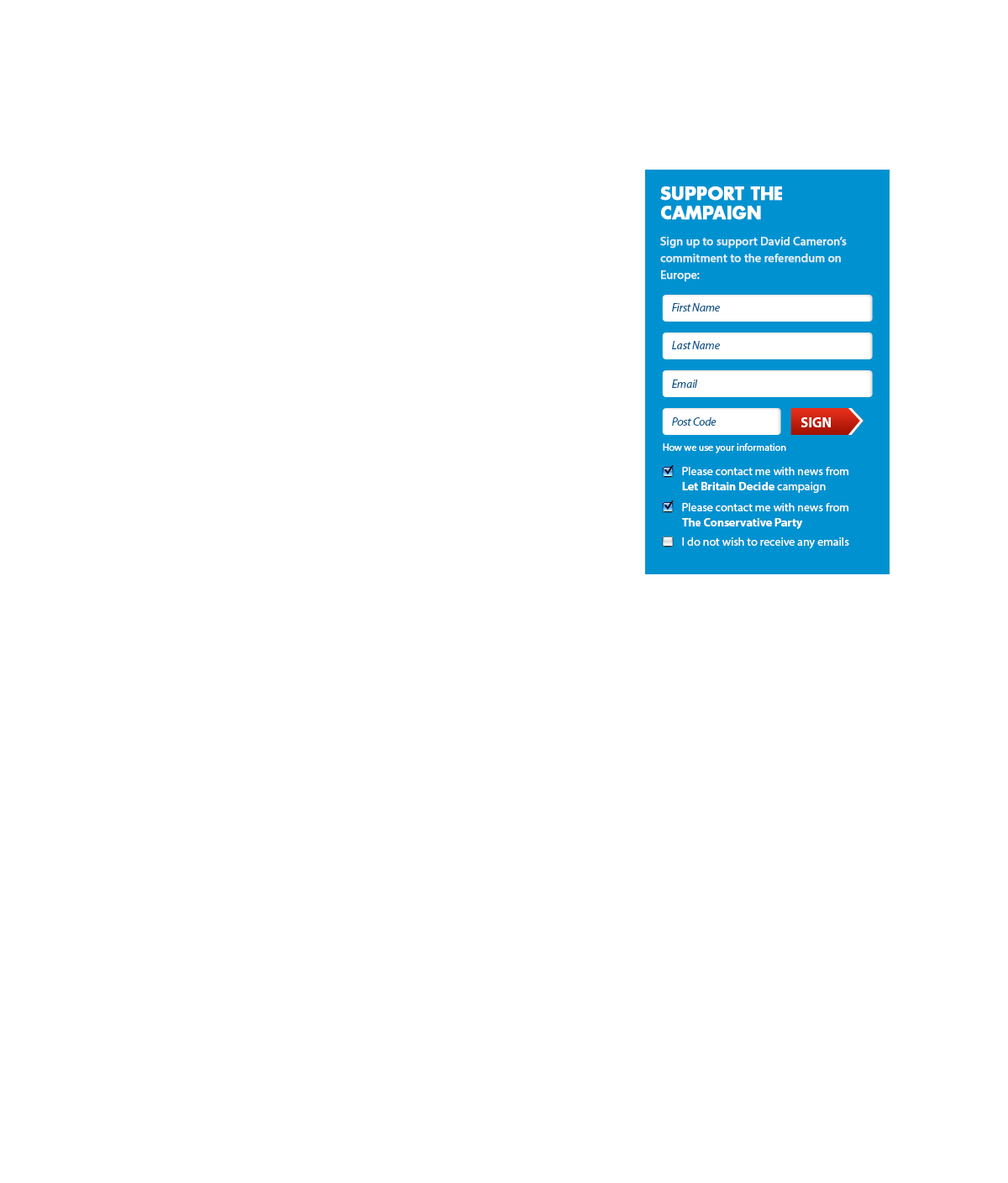
<style>
.page{position:relative;width:1008px;height:1183px;background:#ffffff}
.page>*{position:absolute;margin:0}
.t1{font:16.8px/19.3px "Futura-Bold";color:#ffffff;text-transform:uppercase;font-weight:bold}
.t2{font:11.8px/16.8px "MyriadPro-Regular";color:#dfeff9;font-weight:bold}
.t3{font:11.8px "MyriadPro-It";letter-spacing:-0.02em;color:#05558b}
.t4{font:14.3px "MyriadPro-Bold";color:#ffffff;text-transform:uppercase}
.t5{font:10.1px "MyriadPro-Regular";color:#ffffff}
.t6{font:11.8px/15.1px "MyriadPro-Regular";color:#ffffff}
.t7{font:11.8px/15.1px "MyriadPro-Bold";color:#ffffff}
.t8{font:11.8px "MyriadPro-Regular";color:#ffffff}
</style>
<div class="page">
<p class="t1" style="left:660px;top:186px;width:122px;height:34px">SUpport the campaign</p>
<p class="t2" style="left:660px;top:237px;width:187px;height:45px">Sign up to support David Cameron’s commitment to the referendum on Europe:</p>
<p class="t3" style="left:672px;top:303px;width:48px;height:9px">First Name</p>
<p class="t3" style="left:672px;top:341px;width:48px;height:8px">Last Name</p>
<p class="t3" style="left:672px;top:380px;width:26px;height:8px">Email</p>
<p class="t3" style="left:672px;top:417px;width:44px;height:9px">Post Code</p>
<p class="t4" style="left:800px;top:417px;width:31px;height:10px">Sign</p>
<p class="t4" style="left:800px;top:417px;width:31px;height:10px">Sign</p>
<p class="t5" style="left:663px;top:443px;width:123px;height:10px">How we use your information</p>
<p class="t6" style="left:682px;top:467px;width:166px;height:26px">Please contact me with news from <span class="t7">Let Britain Decide</span> campaign</p>
<p class="t6" style="left:682px;top:503px;width:166px;height:26px">Please contact me with news from <span class="t7">The Conservative Party</span></p>
<p class="t8" style="left:682px;top:537px;width:167px;height:12px">I do not wish to receive any emails</p>
</div>
